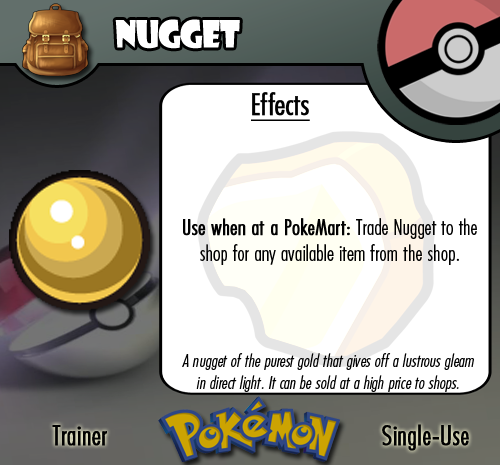
<style>
.page{position:relative;width:500px;height:465px;background:#ffffff}
.page>*{position:absolute;margin:0}
.t1{font:36.7px "ShowcardGothic-Reg";letter-spacing:-0.025em;color:#ffffff;scale:0.91 1}
.t2{font:22.2px "FuturaCondensedBQ-Light";color:#010101}
.t3{font:27.8px "FuturaCondensedBQ-Light";color:#010101;font-weight:bold}
.t4{font:30.6px "FuturaCondensedBQ-Light";color:#010101;font-weight:bold;text-decoration:underline}
.t5{font:22.2px "FuturaCondensedBQ-Light";color:#010101;font-weight:bold}
.t6{font:18.1px "FuturaCondensedBQ-Light";color:#010101;font-style:italic}
</style>
<div class="page">
<p class="t1" style="left:115px;top:19px;width:125px;height:30px">Nugget</p>
<p class="t2" style="left:183px;top:92px;width:294px;height:173px"><span class="t3">  </span><span class="t4">Effects<br><br><br><br><br><br><br><br></span><span class="t5">Use when at a PokeMart: </span>Trade Nugget to the shop for any available item from the shop.</p>
<p class="t6" style="left:182px;top:353px;width:292px;height:39px;text-align:center">A nugget of the purest gold that gives off a lustrous gleam in direct light. It can be sold at a high price to shops.</p>
<p class="t3" style="left:52px;top:425px;width:55px;height:21px">Trainer</p>
<p class="t3" style="left:382px;top:424px;width:87px;height:27px">Single-Use</p>
</div>
